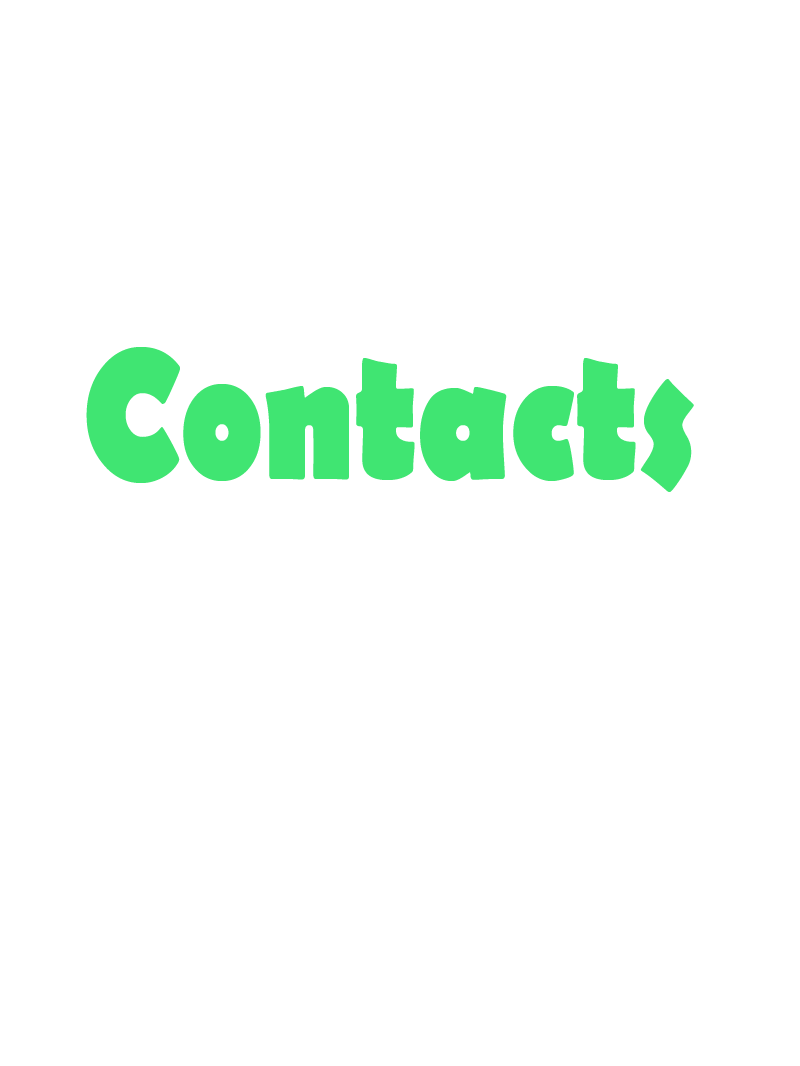
<style>
.page{position:relative;width:800px;height:1066px;background:#ffffff}
.page>*{position:absolute;margin:0}
.t1{font:187.5px "BerlinSansFB-Bold";color:#40e572;scale:0.8 1}
</style>
<div class="page">
<p class="t1" style="left:86px;top:347px;width:608px;height:145px">Contacts</p>
</div>
